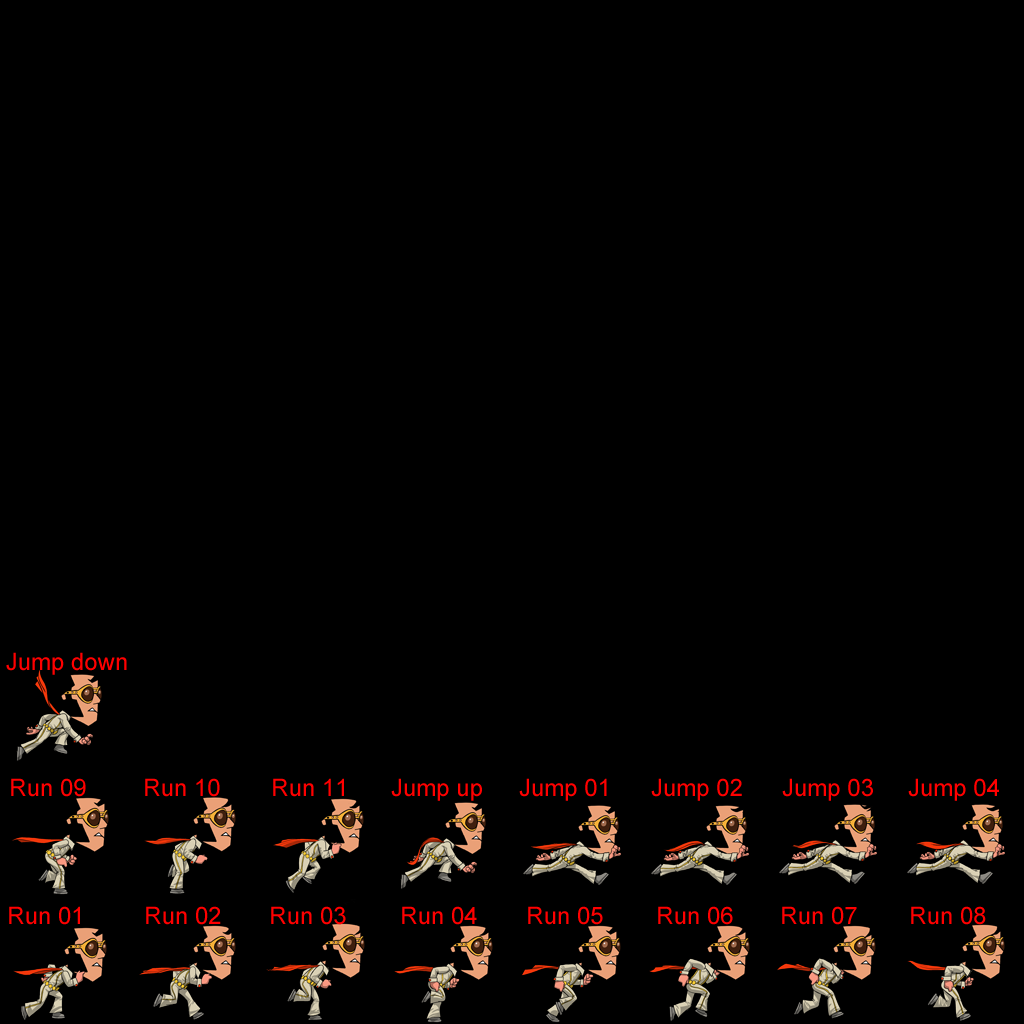
<style>
.page{position:relative;width:1024px;height:1024px;background:#000000}
.page>*{position:absolute;margin:0}
.t1{font:24px "ArialMT";color:#ff0000}
</style>
<div class="page">
<p class="t1" style="left:6px;top:652px;width:121px;height:23px">Jump down</p>
<p class="t1" style="left:11px;top:778px;width:75px;height:19px">Run 09</p>
<p class="t1" style="left:145px;top:778px;width:75px;height:19px">Run 10</p>
<p class="t1" style="left:273px;top:778px;width:71px;height:19px">Run 11</p>
<p class="t1" style="left:391px;top:778px;width:91px;height:23px">Jump up</p>
<p class="t1" style="left:519px;top:778px;width:88px;height:23px">Jump 01</p>
<p class="t1" style="left:651px;top:778px;width:91px;height:23px">Jump 02</p>
<p class="t1" style="left:782px;top:778px;width:91px;height:23px">Jump 03</p>
<p class="t1" style="left:908px;top:778px;width:91px;height:23px">Jump 04</p>
<p class="t1" style="left:9px;top:906px;width:71px;height:19px">Run 01</p>
<p class="t1" style="left:146px;top:906px;width:75px;height:19px">Run 02</p>
<p class="t1" style="left:271px;top:906px;width:75px;height:19px">Run 03</p>
<p class="t1" style="left:402px;top:906px;width:75px;height:19px">Run 04</p>
<p class="t1" style="left:528px;top:906px;width:75px;height:19px">Run 05</p>
<p class="t1" style="left:658px;top:906px;width:75px;height:19px">Run 06</p>
<p class="t1" style="left:782px;top:906px;width:75px;height:19px">Run 07</p>
<p class="t1" style="left:911px;top:906px;width:75px;height:19px">Run 08</p>
</div>
